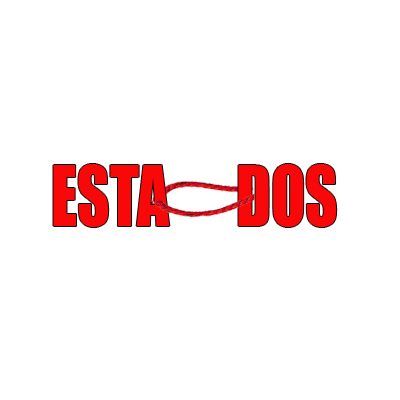
<style>
.page{position:relative;width:400px;height:400px;background:#ffffff}
.page>*{position:absolute;margin:0}
.t1{font:76.7px "Impact";color:#f80808;scale:0.83 1}
</style>
<div class="page">
<p class="t1" style="left:53px;top:164px;width:284px;height:63px">ESTA      DOS</p>
</div>
